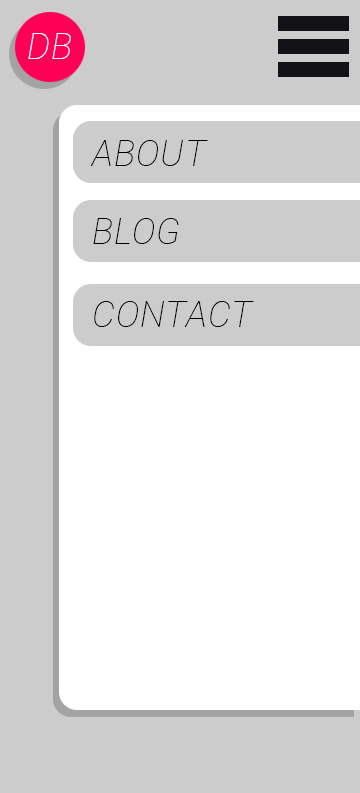
<style>
.page{position:relative;width:360px;height:793px;background:#cccccc}
.page>*{position:absolute;margin:0}
.t1{font:36px "Roboto-ThinItalic";letter-spacing:0.025em;color:#ffffff}
.t2{font:36px "Roboto-ThinItalic";letter-spacing:0.025em;color:#000000}
</style>
<div class="page">
<p class="t1" style="left:28px;top:33px;width:43px;height:26px">DB</p>
<p class="t2" style="left:90px;top:140px;width:118px;height:26px">ABOUT</p>
<p class="t2" style="left:93px;top:218px;width:86px;height:26px">BLOG</p>
<p class="t2" style="left:94px;top:301px;width:160px;height:26px">CONTACT</p>
</div>
